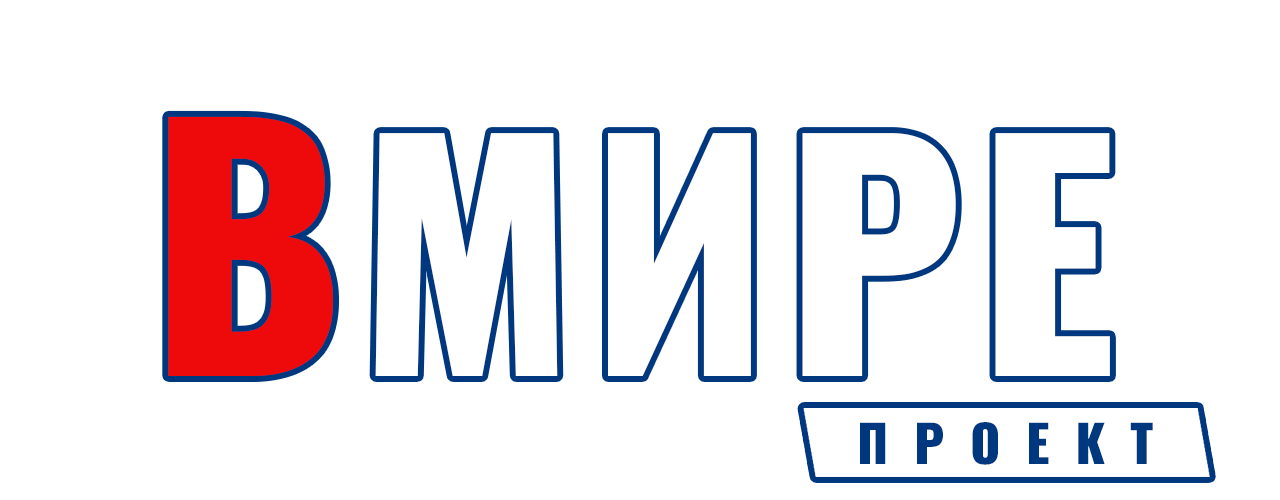
<style>
.page{position:relative;width:1280px;height:500px;background:#ffffff}
.page>*{position:absolute;margin:0}
.t1{font:300px "Oswald-Heavy";letter-spacing:0.05em;color:#ffffff}
.t2{font:320px "Oswald-Heavy";letter-spacing:0.05em;color:#ee0a0a}
.t3{font:51px "Oswald-Heavy";letter-spacing:0.5em;color:#00387f;font-variant:small-caps}
</style>
<div class="page">
<p class="t1" style="left:168px;top:116px;width:942px;height:260px"><span class="t2">В</span>МИРЕ</p>
<p class="t3" style="left:860px;top:422px;width:293px;height:43px">ПРОЕКТ</p>
</div>
